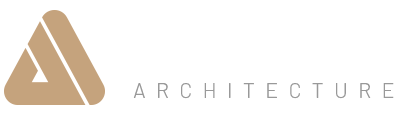
<style>
.page{position:relative;width:401px;height:117px;background:#ffffff}
.page>*{position:absolute;margin:0}
.t1{font:21px "Barlow-Light";letter-spacing:0.5em;color:#999999;text-transform:uppercase}
</style>
<div class="page">
<p class="t1" style="left:133px;top:83px;width:261px;height:16px">ARCHITECTure</p>
</div>
